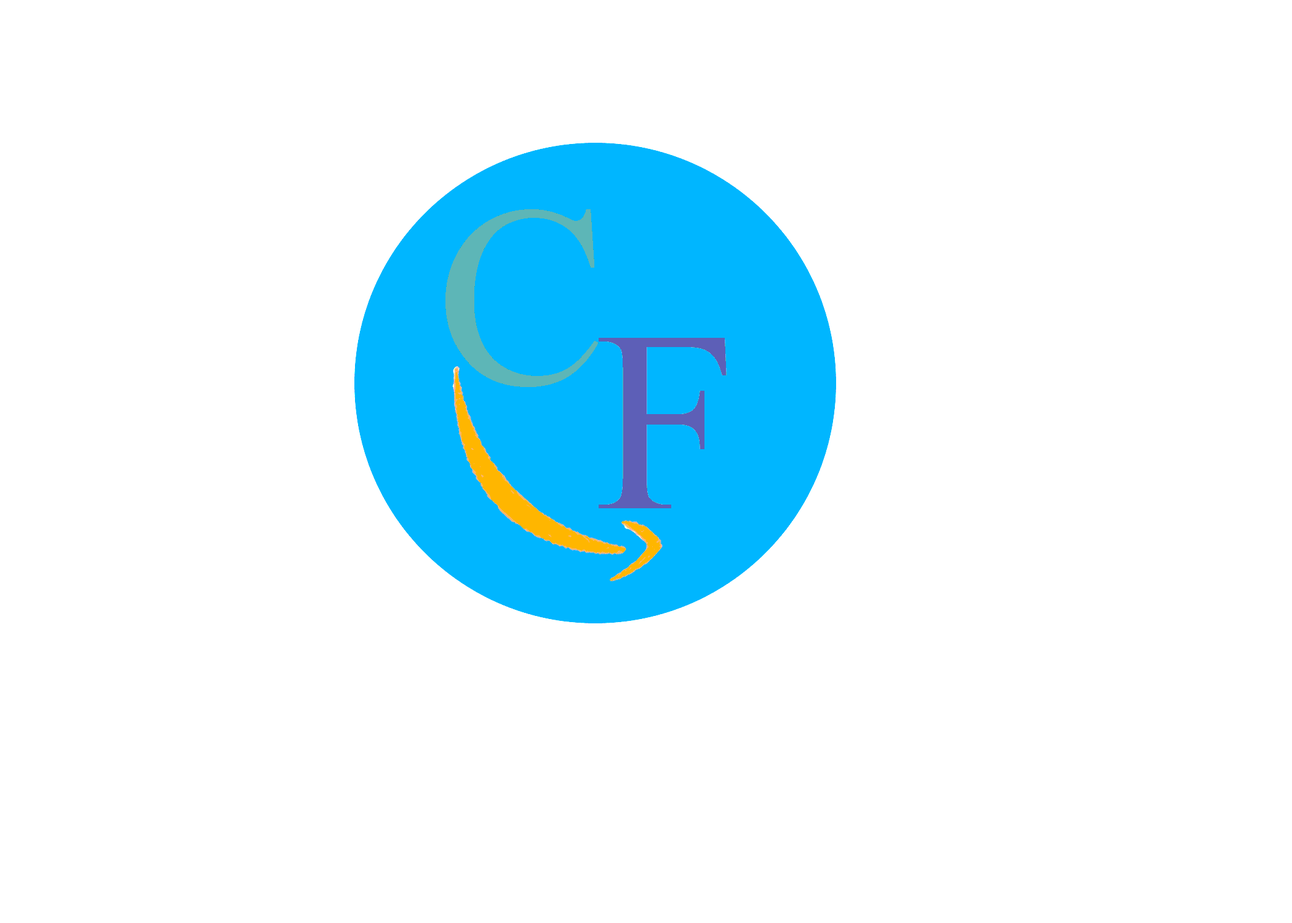
<style>
.page{position:relative;width:1292px;height:923px;background:#ffffff}
.page>*{position:absolute;margin:0}
.t1{font:256.4px "TimesNewRomanPSMT";color:#5db6b7}
.t2{font:256.4px "TimesNewRomanPSMT";color:#5d5fb7}
</style>
<div class="page">
<p class="t1" style="left:445px;top:209px;width:154px;height:178px">C</p>
<p class="t2" style="left:598px;top:338px;width:129px;height:170px">F</p>
</div>
